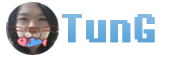
<style>
.page{position:relative;width:169px;height:57px;background:#ffffff}
.page>*{position:absolute;margin:0}
.t1{font:48.3px "Fixedsys";color:#6baddc;font-weight:bold}
</style>
<div class="page">
<p class="t1" style="left:62px;top:14px;width:93px;height:29px">TunG</p>
</div>
